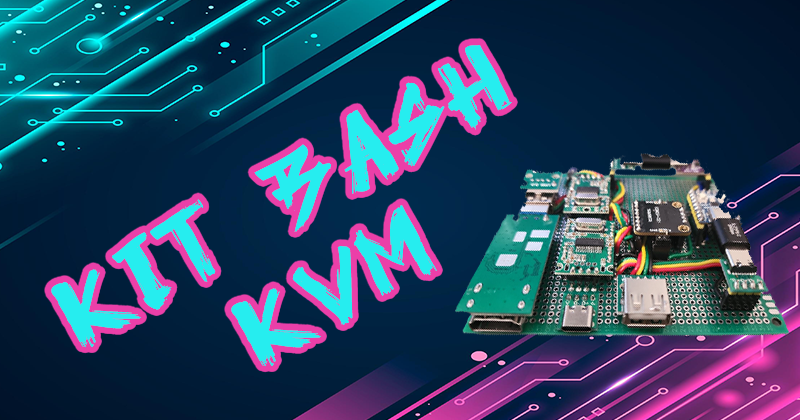
<style>
.page{position:relative;width:800px;height:420px}
.page>*{position:absolute;margin:0}
.t1{font:87.5px "VRUGOTHRegular";color:#26edef}
</style>
<div class="page">
<p class="t1" style="left:51px;top:45px;width:461px;height:321px;text-align:center;rotate:-30deg">KIT-Bash<br>KVM</p>
</div>
